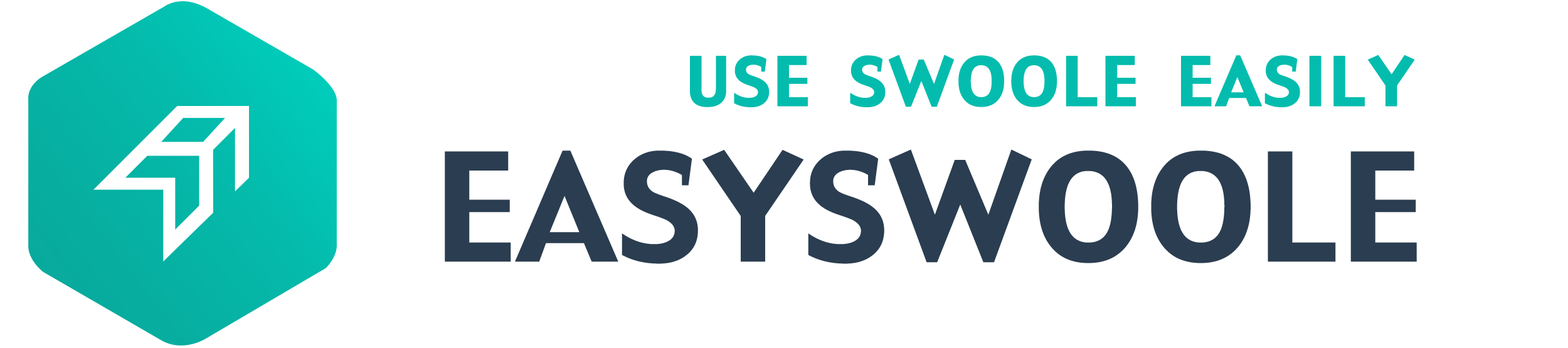
<style>
.page{position:relative;width:1568px;height:348px;background:#ffffff}
.page>*{position:absolute;margin:0}
.t1{font:66.6px "TXWHZGBJT";letter-spacing:0.02em;color:#04bcad;text-transform:uppercase;font-weight:bold}
.t2{font:146.7px "TXWHZGBJT";letter-spacing:0.02em;color:#2b3d50}
</style>
<div class="page">
<p class="t1" style="left:690px;top:55px;width:725px;height:52px">Use Swoole Easily</p>
<p class="t2" style="left:445px;top:149px;width:972px;height:115px">EASYSWOOLE</p>
</div>
